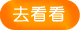
<style>
.page{position:relative;width:80px;height:30px}
.page>*{position:absolute;margin:0}
.t1{font:16px "FZY1JW--GB1-0";letter-spacing:0.1em;color:#ffffff;font-weight:bold}
</style>
<div class="page">
<p class="t1" style="left:13px;top:6px;width:52px;height:16px">去看看</p>
</div>
